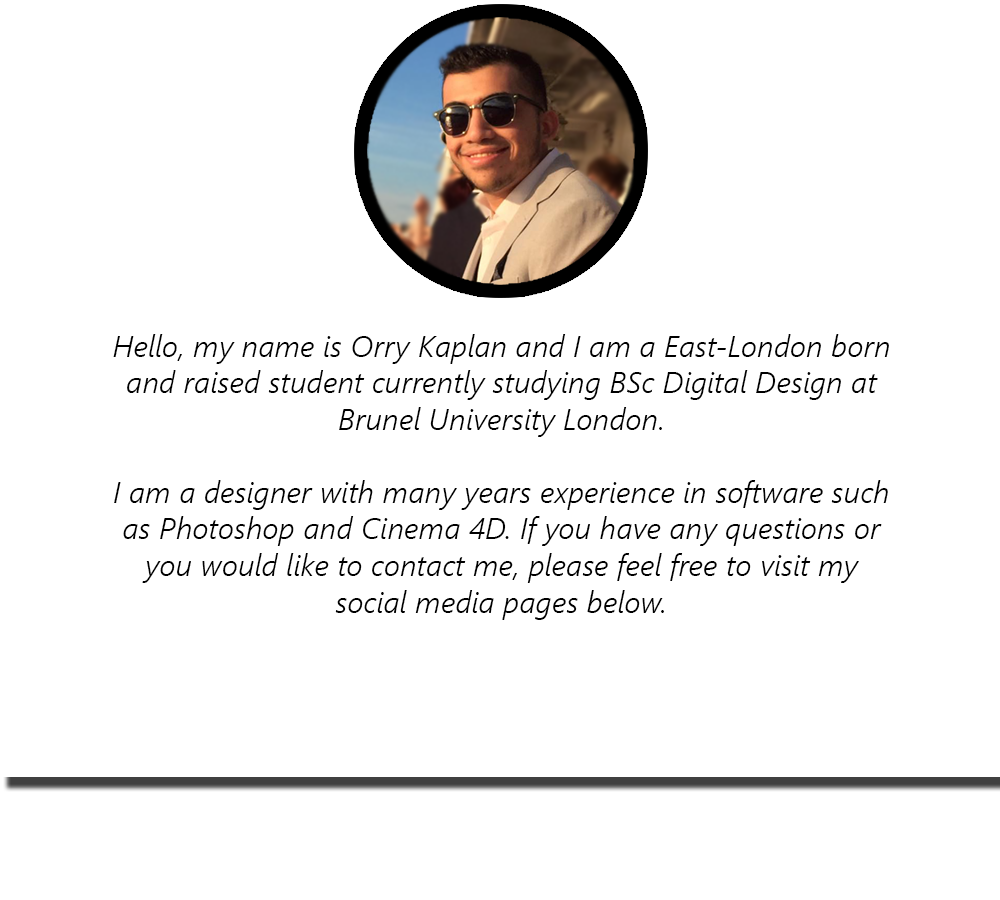
<style>
.page{position:relative;width:1000px;height:900px;background:#ffffff}
.page>*{position:absolute;margin:0}
.t1{font:30.5px "SegoeUI-SemilightItalic";color:#000000}
</style>
<div class="page">
<p class="t1" style="left:113px;top:334px;width:776px;height:286px;text-align:center">Hello, my name is Orry Kaplan and I am a East-London born and raised student currently studying BSc Digital Design at Brunel University London. <br><br>I am a designer with many years experience in software such as Photoshop and Cinema 4D. If you have any questions or you would like to contact me, please feel free to visit my social media pages below.</p>
</div>
